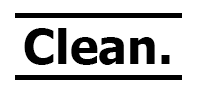
<style>
.page{position:relative;width:197px;height:93px;background:#ffffff}
.page>*{position:absolute;margin:0}
.t1{font:48px "Tahoma-Bold";color:#000000}
</style>
<div class="page">
<p class="t1" style="left:24px;top:28px;width:146px;height:37px">Clean.</p>
</div>
